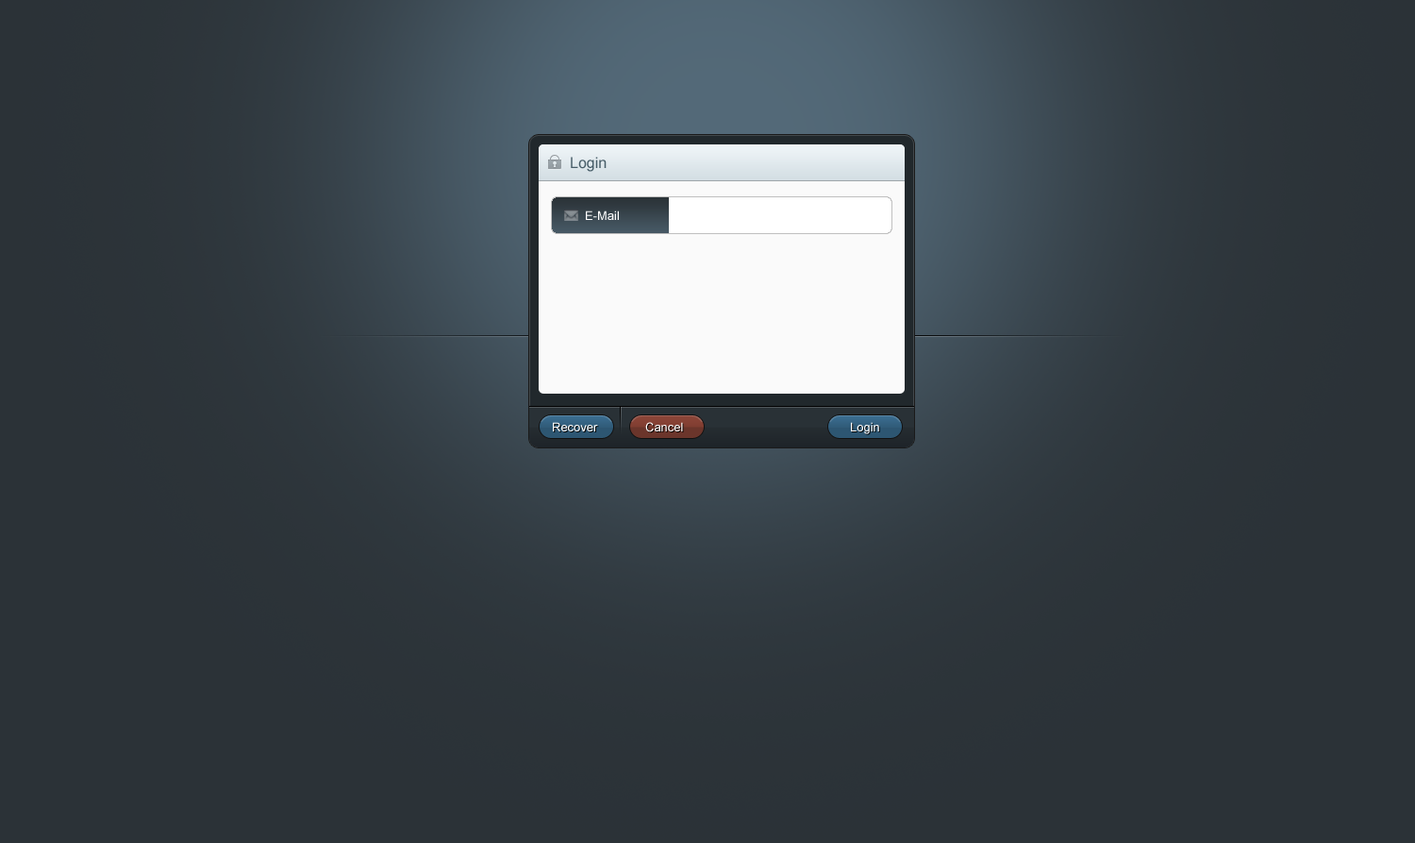
<style>
.page{position:relative;width:1415px;height:843px;background:#2b3237}
.page>*{position:absolute;margin:0}
.t1{font:15.1px "ArialMT";color:#475d68}
.t2{font:12.3px "ArialMT";color:#ffffff}
</style>
<div class="page">
<p class="t1" style="left:571px;top:157px;width:36px;height:15px">Login</p>
<p class="t2" style="left:586px;top:210px;width:33px;height:10px">E-Mail</p>
<p class="t2" style="left:553px;top:422px;width:45px;height:9px">Recover</p>
<p class="t2" style="left:645px;top:422px;width:38px;height:10px">Cancel</p>
<p class="t2" style="left:851px;top:422px;width:28px;height:12px">Login</p>
</div>
